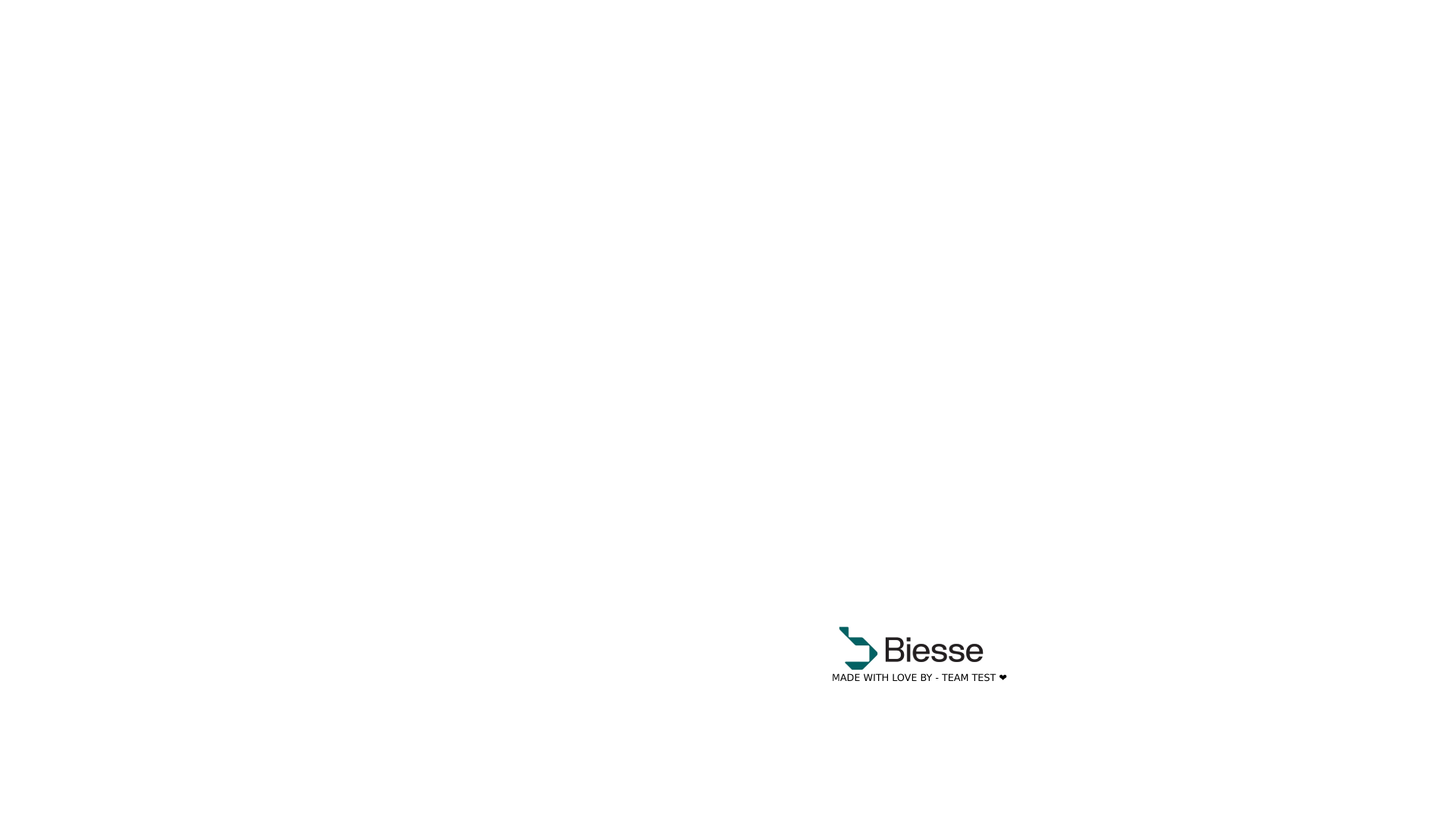
<style>
.page{position:relative;width:1456px;height:819px;background:#ffffff}
.page>*{position:absolute;margin:0}
.t1{font:9.7px "DejaVuSans";color:#000000}
</style>
<div class="page">
<p class="t1" style="left:833px;top:673px;width:174px;height:9px">MADE WITH LOVE BY - TEAM TEST ❤</p>
</div>
